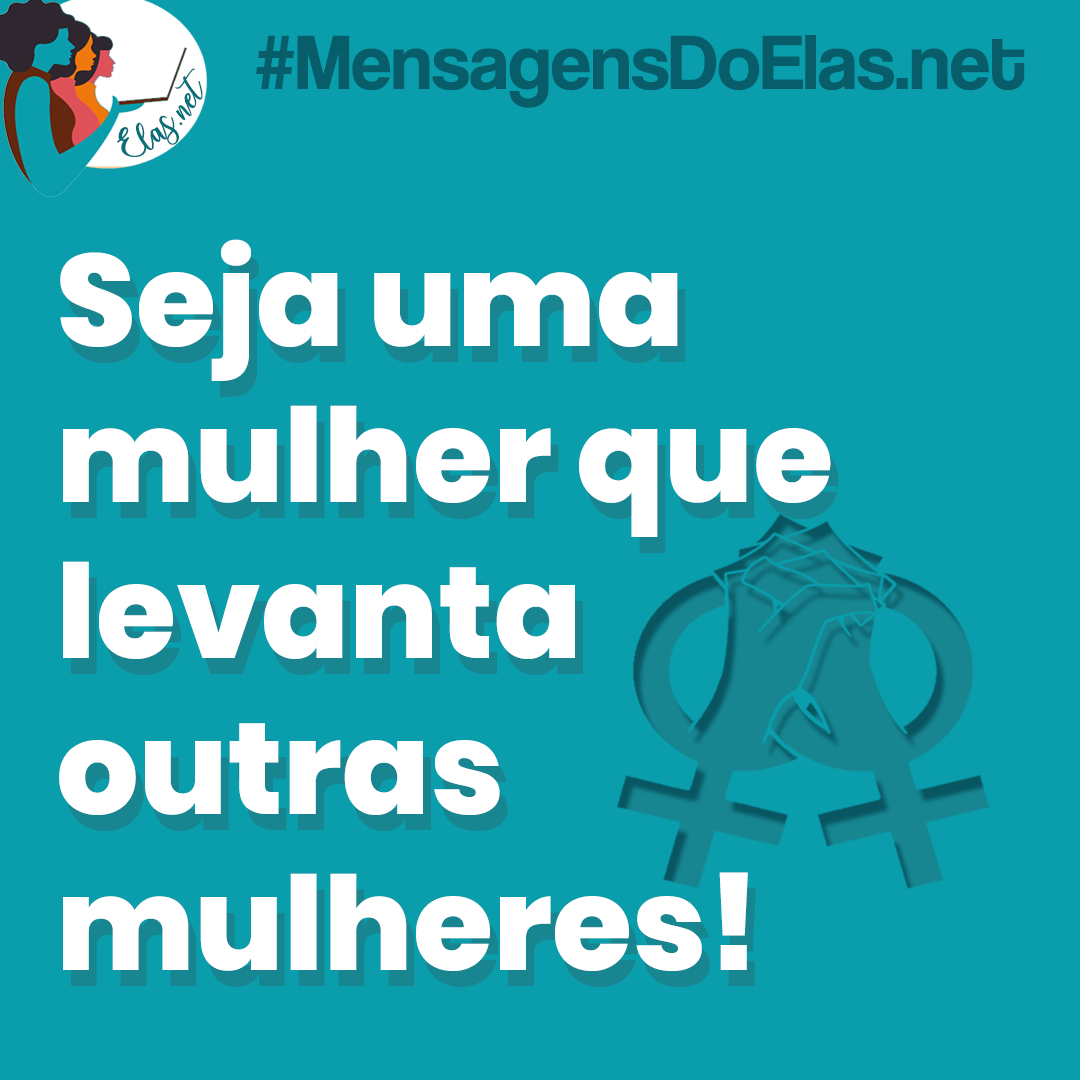
<style>
.page{position:relative;width:1080px;height:1080px;background:#0a9eac}
.page>*{position:absolute;margin:0}
.t1{font:80px "CoolveticaRg-Regular";color:#075662}
.t2{font:25px "charlinda-Regular";color:#086e78;scale:1.18 1}
.t3{font:130px "Poppins-ExtraBold";color:#ffffff}
.t4{font:130px "Poppins-ExtraBold"}
</style>
<div class="page">
<p class="t1" style="left:256px;top:35px;width:769px;height:73px;opacity:0.91">#MensagensDoElas.net</p>
<p class="t2" style="left:117px;top:68px;width:86px;height:89px;rotate:-43deg">Elas.net</p>
<p class="t3" style="left:59px;top:239px;width:772px;height:732px">Seja uma <br>mulher que<br>levanta <br>outras <br>mulheres!</p>
<p class="t4" style="left:67px;top:255px;width:772px;height:732px">Seja uma <br>mulher que<br>levanta <br>outras <br>mulheres!</p>
</div>
